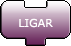
<style>
.page{position:relative;width:71px;height:46px}
.page>*{position:absolute;margin:0}
.t1{font:11px "Verdana";color:#ffffff}
</style>
<div class="page">
<p class="t1" style="left:19px;top:18px;width:34px;height:10px">LIGAR</p>
</div>
